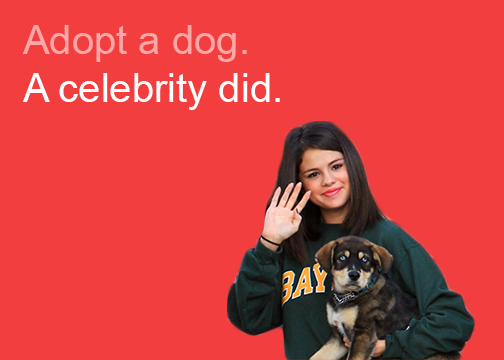
<style>
.page{position:relative;width:504px;height:360px;background:#f23e3e}
.page>*{position:absolute;margin:0}
.t1{font:40px "ArialMT";color:#ffffff}
.t2{font:40px "ArialMT";color:#ffa7a7}
</style>
<div class="page">
<p class="t1" style="left:23px;top:25px;width:257px;height:85px"><span class="t2">Adopt a dog.<br></span>A celebrity did.</p>
</div>
